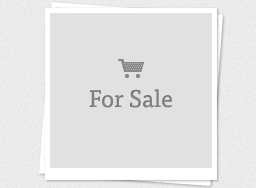
<style>
.page{position:relative;width:256px;height:188px;background:#e1e1e1}
.page>*{position:absolute;margin:0}
.t1{font:24px "TisaOffc";color:#898989}
</style>
<div class="page">
<p class="t1" style="left:89px;top:89px;width:83px;height:19px">For Sale</p>
</div>
